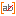
<style>
.page{position:relative;width:16px;height:16px;background:#ffffff}
.page>*{position:absolute;margin:0}
.t1{font:11px "Calibri-Bold";letter-spacing:-0.06em;color:#6e6e6e}
</style>
<div class="page">
<p class="t1" style="left:3px;top:4px;width:10px;height:7px">ab</p>
</div>
